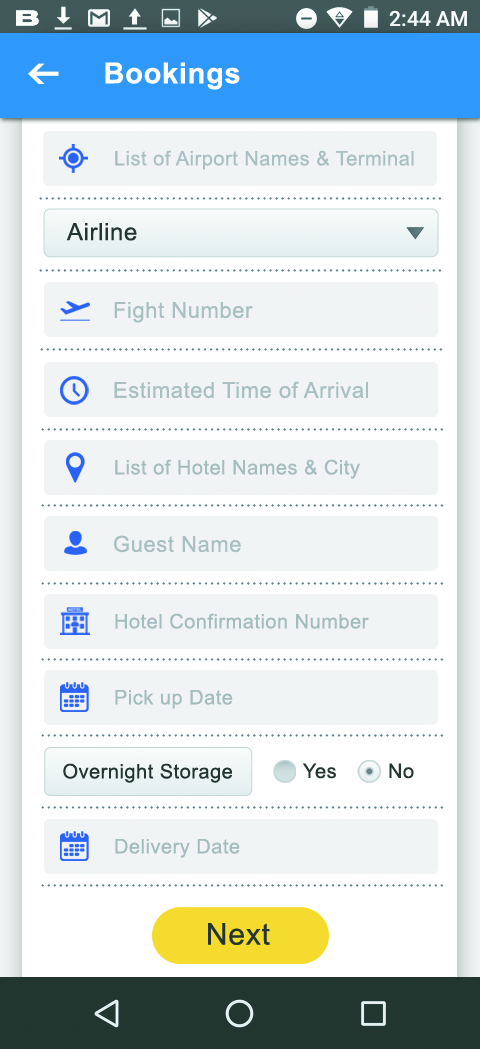
<style>
.page{position:relative;width:480px;height:1049px;background:#ffffff}
.page>*{position:absolute;margin:0}
.t1{font:29px "Arial-BoldMT";letter-spacing:0.025em;color:#ffffff}
.t2{font:20px "ArialMT";letter-spacing:0.025em;color:#a8c0c2}
.t3{font:20px "ArialMT";letter-spacing:0.025em;color:#a3bcbd}
.t4{font:24px "ArialMT";letter-spacing:0.025em;color:#22362f}
.t5{font:22px "ArialMT";letter-spacing:0.025em;color:#a8c0c2}
.t6{font:20px "ArialMT";letter-spacing:0.025em;color:#22362f}
.t7{font:30px "ArialMT";letter-spacing:0.025em;color:#22362f}
</style>
<div class="page">
<p class="t1" style="left:105px;top:62px;width:135px;height:28px">Bookings</p>
<p class="t2" style="left:115px;top:150px;width:299px;height:20px"><span class="t3">L</span>ist of Airport Names &amp; Terminal</p>
<p class="t4" style="left:66px;top:223px;width:71px;height:18px">Airline</p>
<p class="t5" style="left:114px;top:302px;width:139px;height:21px">Fight Number</p>
<p class="t5" style="left:114px;top:381px;width:254px;height:18px">Estimated Time of Arrival</p>
<p class="t3" style="left:115px;top:459px;width:245px;height:20px">List of Hotel Names &amp; City</p>
<p class="t5" style="left:114px;top:535px;width:127px;height:18px">Guest Name</p>
<p class="t3" style="left:115px;top:613px;width:254px;height:16px">Hotel Confirmation Number</p>
<p class="t3" style="left:115px;top:690px;width:118px;height:19px">Pick up Date</p>
<p class="t6" style="left:63px;top:763px;width:169px;height:20px">Overnight Storage</p>
<p class="t6" style="left:303px;top:763px;width:33px;height:16px">Yes</p>
<p class="t6" style="left:389px;top:763px;width:25px;height:16px">No</p>
<p class="t3" style="left:115px;top:839px;width:125px;height:19px">Delivery Date</p>
<p class="t7" style="left:208px;top:923px;width:62px;height:22px">Next</p>
</div>
